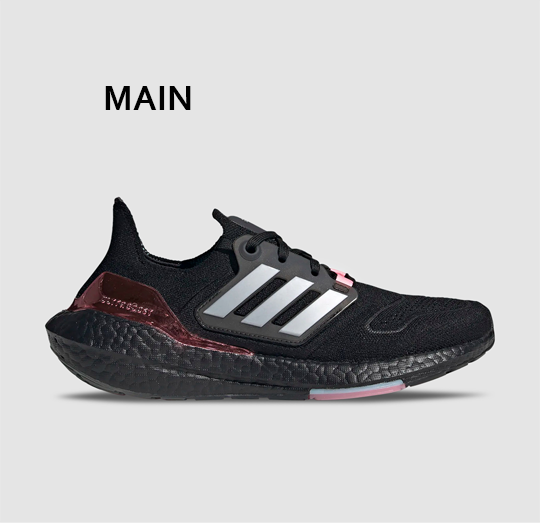
<style>
.page{position:relative;width:540px;height:523px;background:#e5e5e5}
.page>*{position:absolute;margin:0}
.t1{font:36px "Corbel-Bold";letter-spacing:-0.04em;color:#000000;text-transform:uppercase}
</style>
<div class="page">
<p class="t1" style="left:105px;top:86px;width:86px;height:24px">main</p>
</div>
